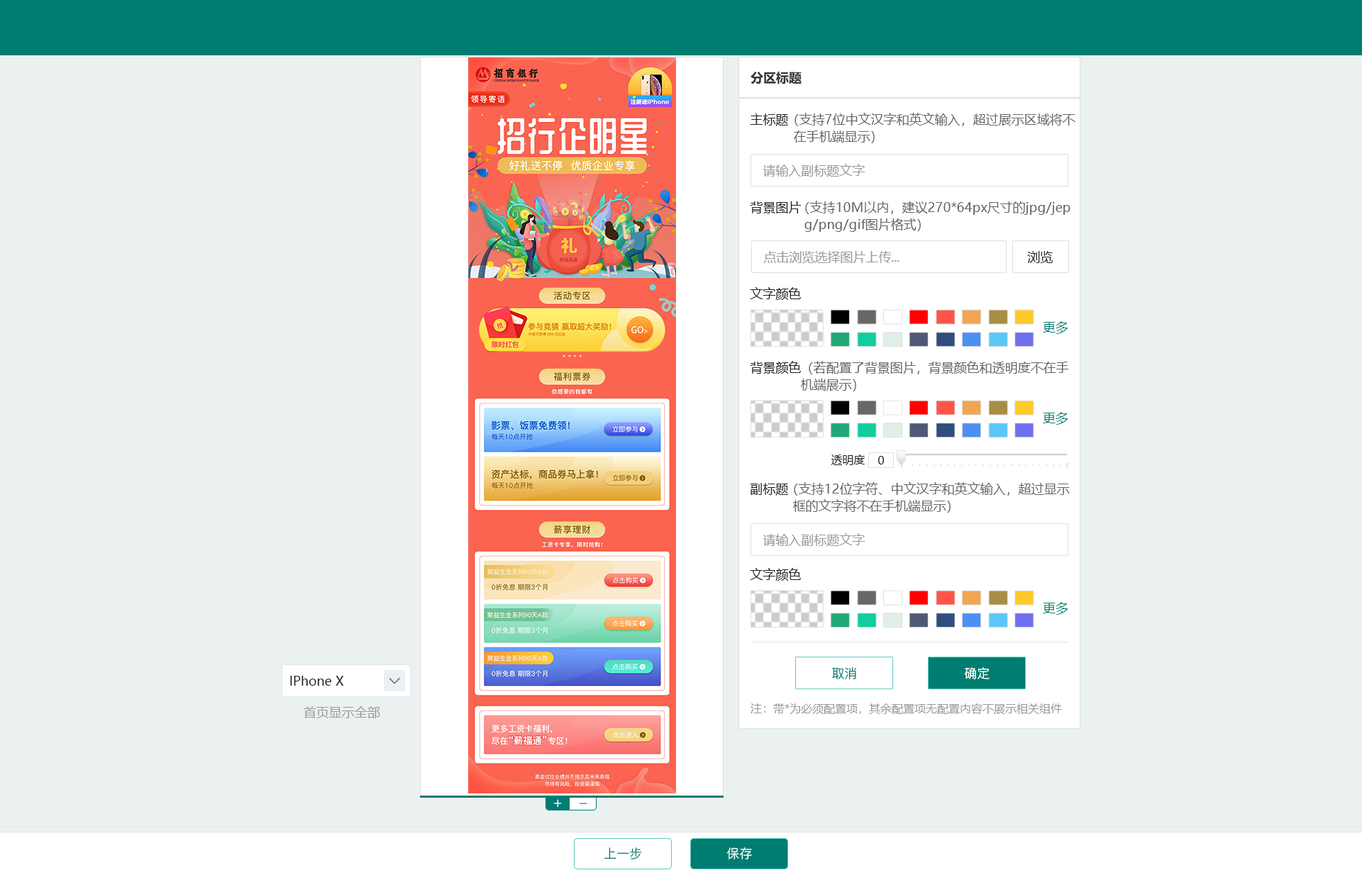
<style>
.page{position:relative;width:1362px;height:875px;background:#ebf1f1}
.page>*{position:absolute;margin:0}
.t1{font:12.8px "MicrosoftYaHei-Bold";color:#333333}
.t2{font:12.8px "MicrosoftYaHei";color:#222222}
.t3{font:12.8px/17px "MicrosoftYaHei";color:#666666}
.t4{font:12.8px "MicrosoftYaHei";color:#999999}
.t5{font:12.8px "MicrosoftYaHei";color:#007d71}
.t6{font:11.4px "MicrosoftYaHei";color:#222222}
.t7{font:12.8px "PingFang-SC-Medium";color:#007d71}
.t8{font:12.8px "PingFang-SC-Medium";color:#ffffff}
.t9{font:11.4px "MicrosoftYaHei";color:#999999}
.t10{font:14.2px "PingFang-SC-Medium";color:#ffffff}
.t11{font:14.2px "PingFang-SC-Medium"}
</style>
<div class="page">
<p class="t1" style="left:751px;top:72px;width:51px;height:12px">分区标题</p>
<p class="t2" style="left:750px;top:114px;width:38px;height:12px">主标题</p>
<p class="t3" style="left:794px;top:113px;width:281px;height:30px">（支持7位中文汉字和英文输入，超过展示区域将不<br>  在手机端显示）</p>
<p class="t4" style="left:763px;top:164px;width:102px;height:13px">请输入副标题文字</p>
<p class="t2" style="left:750px;top:201px;width:51px;height:13px">背景图片</p>
<p class="t3" style="left:804px;top:201px;width:267px;height:31px">（支持10M以内，建议270*64px尺寸的jpg/jep<br>  g/png/gif图片格式）</p>
<p class="t4" style="left:763px;top:251px;width:137px;height:12px">点击浏览选择图片上传...</p>
<p class="t2" style="left:1027px;top:251px;width:26px;height:12px">浏览</p>
<p class="t2" style="left:750px;top:287px;width:51px;height:13px">文字颜色</p>
<p class="t5" style="left:1043px;top:321px;width:25px;height:13px">更多</p>
<p class="t2" style="left:750px;top:361px;width:51px;height:13px">背景颜色</p>
<p class="t3" style="left:801px;top:361px;width:268px;height:31px">（若配置了背景图片，背景颜色和透明度不在手<br>机端展示）</p>
<p class="t5" style="left:1043px;top:412px;width:25px;height:13px">更多</p>
<p class="t6" style="left:831px;top:455px;width:34px;height:10px">透明度</p>
<p class="t6" style="left:878px;top:456px;width:6px;height:9px">0</p>
<p class="t2" style="left:750px;top:483px;width:38px;height:13px">副标题</p>
<p class="t3" style="left:793px;top:482px;width:277px;height:31px">（支持12位字符、中文汉字和英文输入，超过显示<br>  框的文字将不在手机端显示）</p>
<p class="t4" style="left:763px;top:533px;width:102px;height:14px">请输入副标题文字</p>
<p class="t2" style="left:750px;top:568px;width:51px;height:13px">文字颜色</p>
<p class="t5" style="left:1043px;top:602px;width:25px;height:13px">更多</p>
<p class="t2" style="left:290px;top:676px;width:54px;height:10px">IPhone X</p>
<p class="t7" style="left:832px;top:668px;width:24px;height:12px">取消</p>
<p class="t8" style="left:965px;top:668px;width:25px;height:12px">确定</p>
<p class="t4" style="left:304px;top:707px;width:76px;height:12px">首页显示全部</p>
<p class="t9" style="left:751px;top:704px;width:311px;height:10px">注：带*为必须配置项，其余配置项无配置内容不展示相关组件</p>
<p class="t10" style="left:554px;top:800px;width:8px;height:8px">+</p>
<p class="t11" style="left:580px;top:803px;width:7px;height:1px">_</p>
<p class="t7" style="left:604px;top:848px;width:38px;height:12px">上一步</p>
<p class="t8" style="left:726px;top:848px;width:26px;height:12px">保存</p>
</div>
